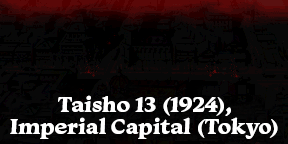
<style>
.page{position:relative;width:288px;height:144px;background:#080808}
.page>*{position:absolute;margin:0}
.t1{font:22px "Monarcha-Bold";color:#ffffff}
</style>
<div class="page">
<p class="t1" style="left:58px;top:95px;width:173px;height:21px">Taisho 13 (1924),</p>
<p class="t1" style="left:10px;top:117px;width:268px;height:22px">Imperial Capital (Tokyo)</p>
</div>
